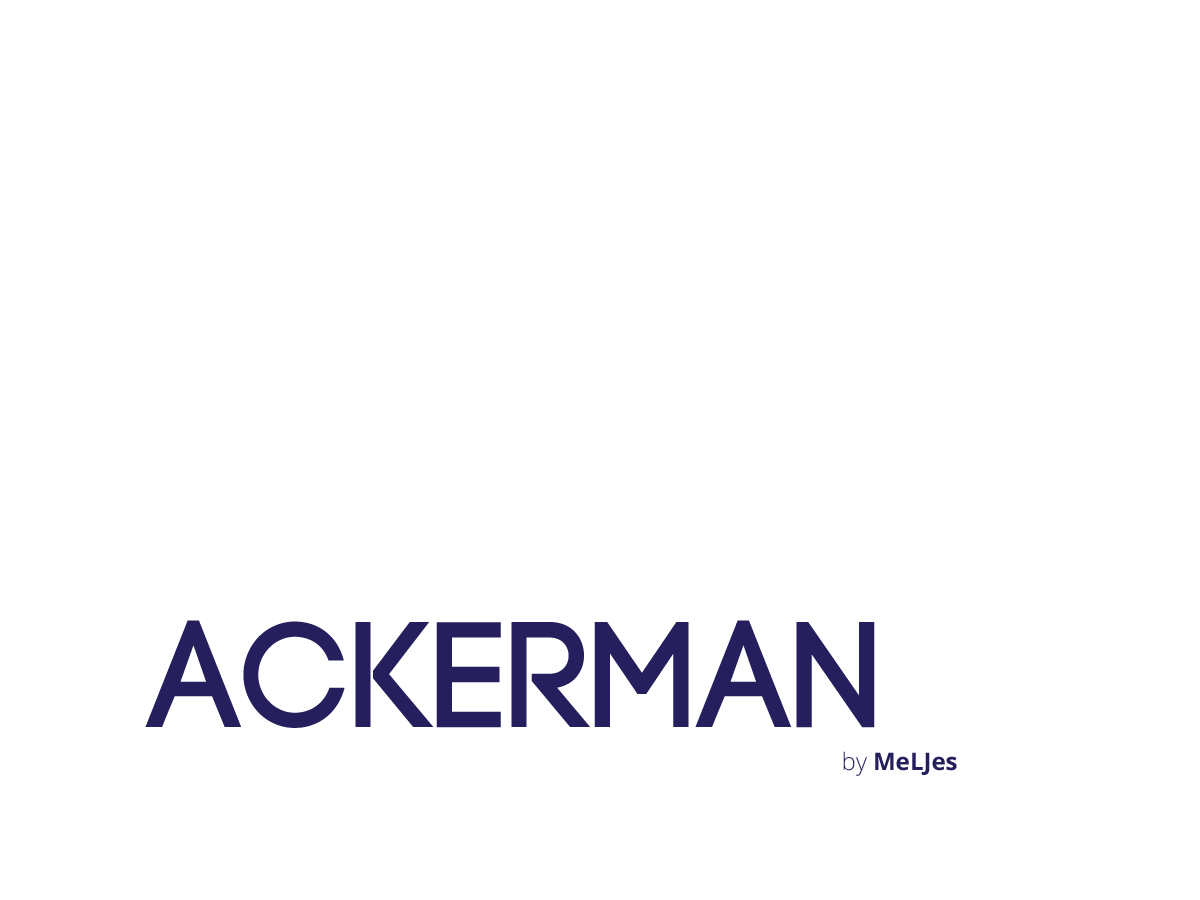
<style>
.page{position:relative;width:1200px;height:900px;background:#ffffff}
.page>*{position:absolute;margin:0}
.t1{font:150px "Code-Bold";letter-spacing:0.025em;color:#25205d;text-transform:uppercase}
.t2{font:24px "OpenSans-Bold";color:#25205d}
.t3{font:24px "OpenSans-Light";color:#25205d}
</style>
<div class="page">
<p class="t1" style="left:145px;top:620px;width:730px;height:108px">ackerman</p>
<p class="t2" style="left:843px;top:751px;width:114px;height:25px"><span class="t3">by </span>MeLJes</p>
</div>
